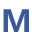
<style>
.page{position:relative;width:32px;height:32px;background:#ffffff}
.page>*{position:absolute;margin:0}
.t1{font:30px "MicrosoftYaHei-Bold";color:#3b5999}
</style>
<div class="page">
<p class="t1" style="left:3px;top:9px;width:26px;height:23px">M</p>
</div>
